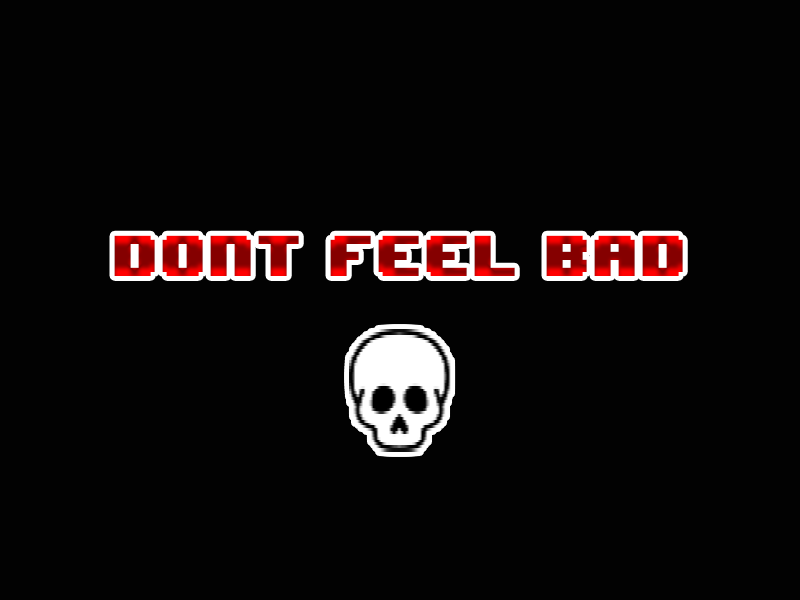
<style>
.page{position:relative;width:800px;height:600px;background:#020202}
.page>*{position:absolute;margin:0}
.t1{font:48px "8BITWONDERNominal"}
</style>
<div class="page">
<p class="t1" style="left:114px;top:235px;width:569px;height:41px">DONT FEEL BAD</p>
</div>
